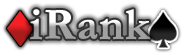
<style>
.page{position:relative;width:184px;height:53px;background:#ffffff}
.page>*{position:absolute;margin:0}
.t1{font:44.9px "Garamond-Bold";font-weight:bold}
</style>
<div class="page">
<p class="t1" style="left:30px;top:9px;width:120px;height:31px">iRank</p>
</div>
